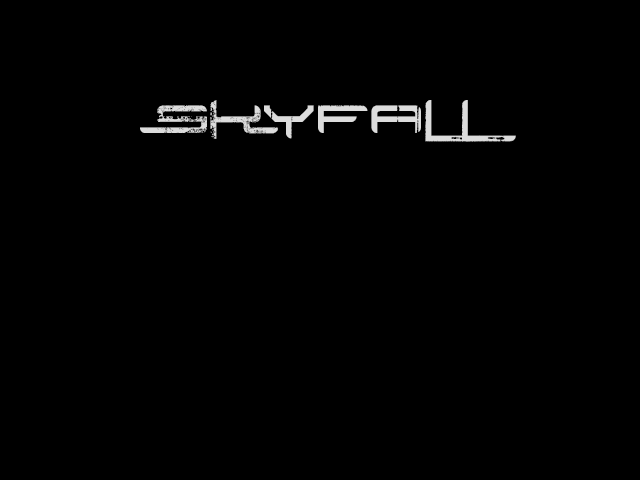
<style>
.page{position:relative;width:640px;height:480px;background:#000000}
.page>*{position:absolute;margin:0}
.t1{font:30px "RyskyLines";color:#dcdcdc}
</style>
<div class="page">
<p class="t1" style="left:140px;top:100px;width:376px;height:42px">SKYFALL</p>
</div>
